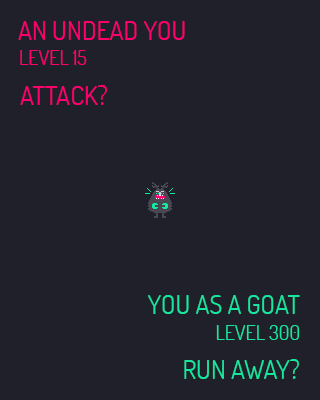
<style>
.page{position:relative;width:320px;height:400px;background:#20202a}
.page>*{position:absolute;margin:0}
.t1{font:26px "Dosis-Regular";color:#ff006d;text-transform:uppercase}
.t2{font:20px "Dosis-Regular";color:#ff006d;text-transform:uppercase}
.t3{font:26px "Dosis-Regular";color:#17e69d;text-transform:uppercase}
.t4{font:20px "Dosis-Regular";color:#17e69d;text-transform:uppercase}
.t5{font:26px "Dosis-Regular";color:#17e69d}
</style>
<div class="page">
<p class="t1" style="left:18px;top:21px;width:167px;height:19px">an undead you</p>
<p class="t2" style="left:20px;top:50px;width:67px;height:15px">Level 15</p>
<p class="t1" style="left:20px;top:85px;width:87px;height:20px">attack?</p>
<p class="t3" style="left:148px;top:295px;width:152px;height:19px">you as a goat</p>
<p class="t4" style="left:216px;top:325px;width:84px;height:15px">level 300</p>
<p class="t5" style="left:184px;top:359px;width:115px;height:20px">RUN AWAY?</p>
</div>
